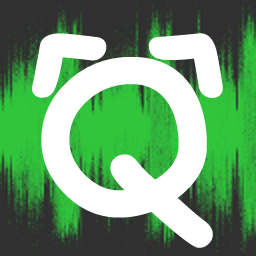
<style>
.page{position:relative;width:256px;height:256px;background:#ffffff}
.page>*{position:absolute;margin:0}
.t1{font:200px "ComicSansMS-Bold";color:#ffffff}
</style>
<div class="page">
<p class="t1" style="left:32px;top:33px;width:75px;height:65px;rotate:-36deg">^</p>
<p class="t1" style="left:148px;top:33px;width:75px;height:65px;rotate:38deg">^</p>
<p class="t1" style="left:41px;top:57px;width:172px;height:191px">Q</p>
</div>
